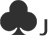
<style>
.page{position:relative;width:55px;height:36px;background:#ffffff}
.page>*{position:absolute;margin:0}
.t1{font:23.4px "MyriadPro-Regular";letter-spacing:-0.1em;color:#303030;font-weight:bold}
</style>
<div class="page">
<p class="t1" style="left:39px;top:19px;width:9px;height:17px">J</p>
</div>
